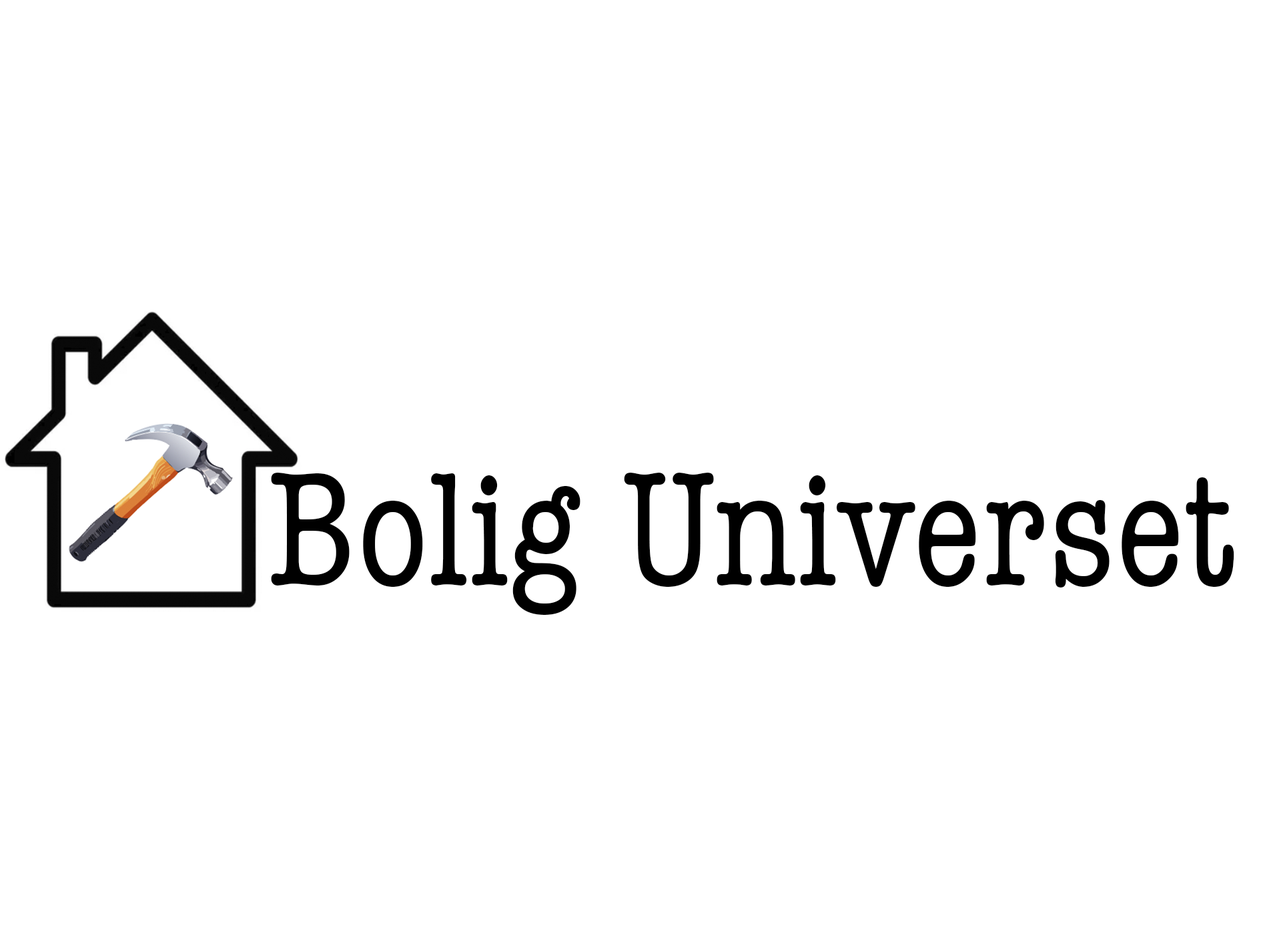
<style>
.page{position:relative;width:1261px;height:946px;background:#ffffff}
.page>*{position:absolute;margin:0}
.t1{font:166.8px "AmericanTypewriter-Condensed";color:#000000}
</style>
<div class="page">
<p class="t1" style="left:271px;top:472px;width:963px;height:143px">Bolig Universet</p>
</div>
